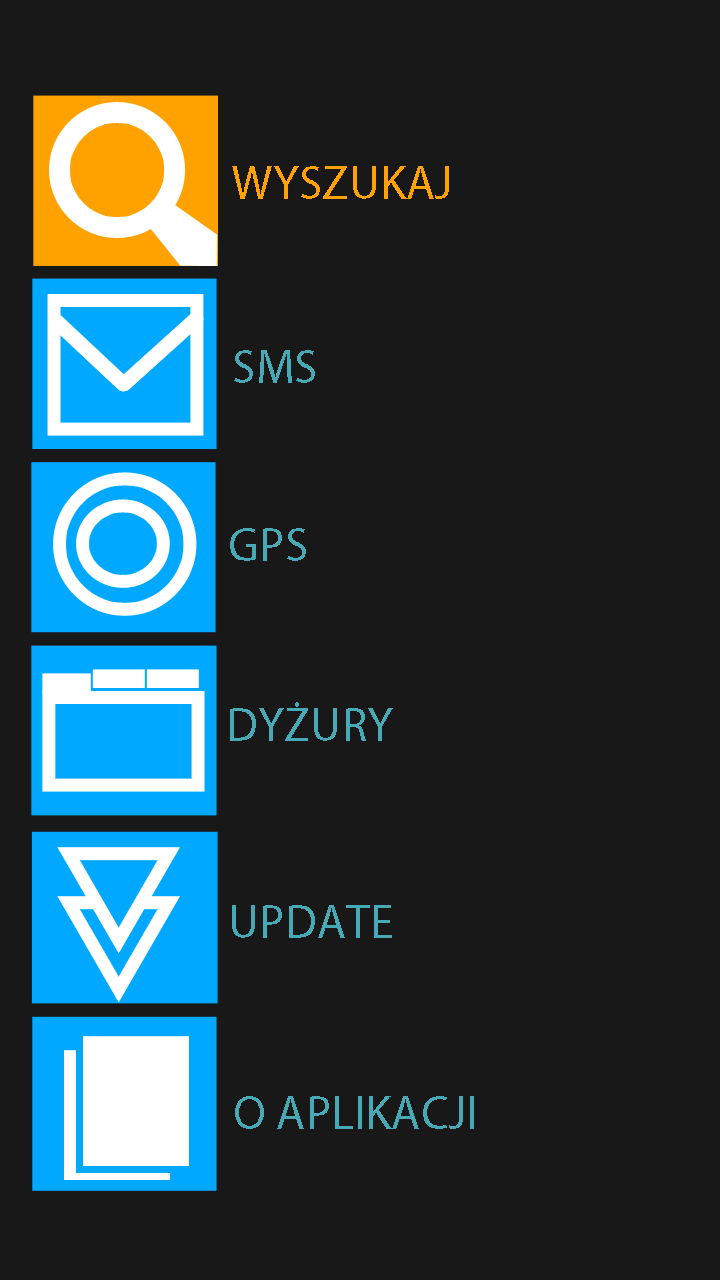
<style>
.page{position:relative;width:720px;height:1280px;background:#181818}
.page>*{position:absolute;margin:0}
.t1{font:48px "MyriadPro-Regular";color:#ffa200}
.t2{font:48px "MyriadPro-Regular";color:#46a9b5}
</style>
<div class="page">
<p class="t1" style="left:232px;top:166px;width:217px;height:33px">WYSZUKAJ</p>
<p class="t2" style="left:234px;top:350px;width:81px;height:33px">SMS</p>
<p class="t2" style="left:230px;top:528px;width:76px;height:33px">GPS</p>
<p class="t2" style="left:230px;top:702px;width:163px;height:39px">DYŻURY</p>
<p class="t2" style="left:232px;top:905px;width:160px;height:33px">UPDATE</p>
<p class="t2" style="left:235px;top:1096px;width:239px;height:33px">O APLIKACJI</p>
</div>
